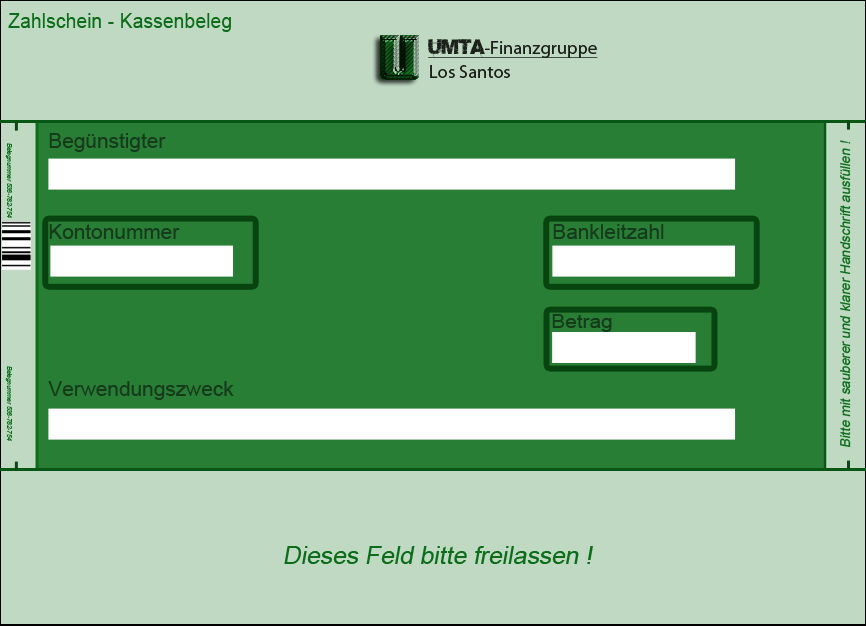
<style>
.page{position:relative;width:866px;height:626px;background:#c0d9c3}
.page>*{position:absolute;margin:0}
.t1{font:20.4px "ArialMT";color:#0b6d19;scale:0.95 1}
.t2{font:18.4px "MyriadPro-Regular";color:#1c201b;text-decoration:underline}
.t3{font:18.4px "Base05";color:#1c201b;text-decoration:underline}
.t4{font:18.4px "MyriadPro-Regular";color:#1c201b}
.t5{font:20.8px "ArialMT";color:#163b1c}
.t6{font:6.1px "ArialMT";color:#0b6d19;font-style:italic}
.t7{font:13.5px "ArialMT";color:#0b6d19;font-style:italic}
.t8{font:18.8px "ArialMT";color:#163b1c;scale:1.11 1}
.t9{font:24.6px "ArialMT";color:#0b6d19;font-style:italic}
</style>
<div class="page">
<p class="t1" style="left:8px;top:13px;width:223px;height:19px">Zahlschein - Kassenbeleg</p>
<p class="t2" style="left:428px;top:39px;width:170px;height:20px"><span class="t3">Umta</span>-Finanzgruppe</p>
<p class="t4" style="left:430px;top:65px;width:80px;height:13px">Los Santos</p>
<p class="t5" style="left:49px;top:133px;width:117px;height:19px">Begünstigter</p>
<p class="t6" style="left:5px;top:143px;width:7px;height:75px;rotate:90deg">Belegnummer 538-782-754</p>
<p class="t7" style="left:840px;top:140px;width:11px;height:308px;rotate:-90deg">Bitte mit sauberer und klarer Handschrift ausfüllen !</p>
<p class="t5" style="left:49px;top:224px;width:131px;height:15px">Kontonummer</p>
<p class="t5" style="left:553px;top:224px;width:111px;height:15px">Bankleitzahl</p>
<p class="t8" style="left:552px;top:314px;width:60px;height:18px">Betrag</p>
<p class="t6" style="left:5px;top:366px;width:7px;height:75px;rotate:90deg">Belegnummer 538-782-754</p>
<p class="t5" style="left:48px;top:381px;width:186px;height:19px">Verwendungszweck</p>
<p class="t9" style="left:284px;top:546px;width:309px;height:18px">Dieses Feld bitte freilassen !</p>
</div>
